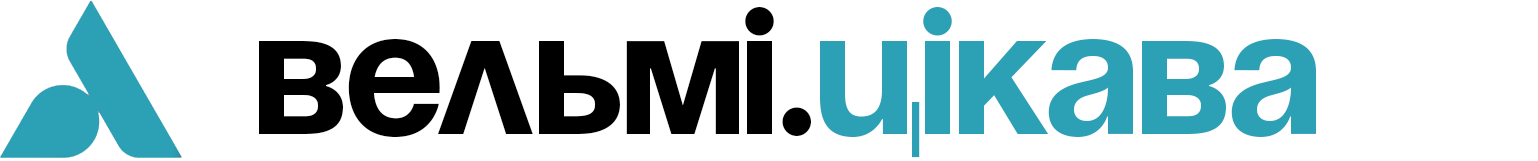
<style>
.page{position:relative;width:1538px;height:161px;background:#ffffff}
.page>*{position:absolute;margin:0}
.t1{font:178.2px "SoyuzGrotesk-Bold";color:#000000}
.t2{font:178.2px "SoyuzGrotesk-Bold";color:#2ca1b6}
</style>
<div class="page">
<p class="t1" style="left:259px;top:7px;width:1057px;height:151px">вельмi.<span class="t2">ЦiКАВА</span></p>
</div>
